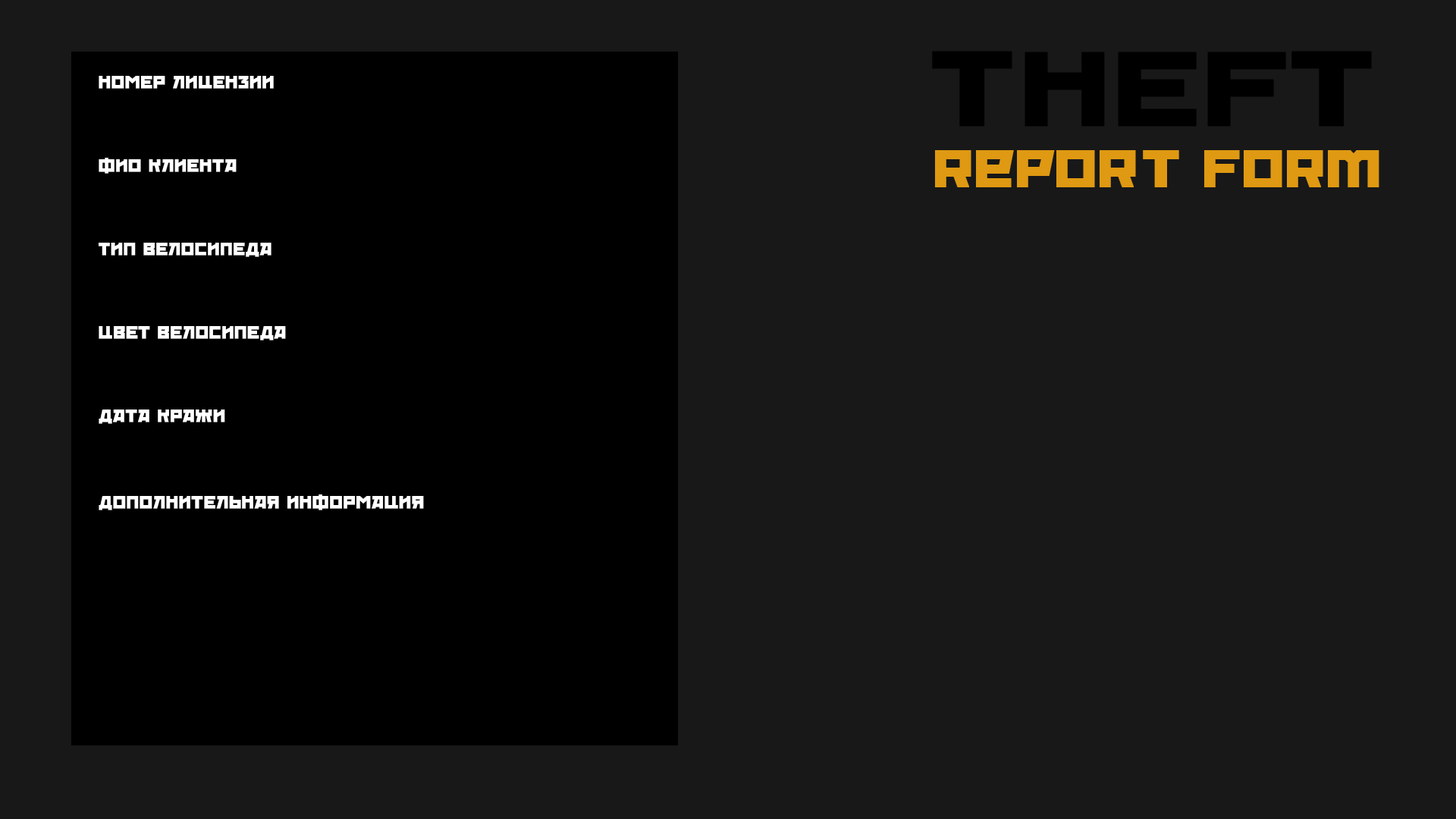
<style>
.page{position:relative;width:1456px;height:819px;background:#181818}
.page>*{position:absolute;margin:0}
.t1{font:45.5px/60.7px "RedOctober";color:#df9912;font-weight:bold;scale:1.19 1}
.t2{font:92.7px/60.7px "RedOctober";color:#000000;font-weight:bold;scale:1.33 1}
.t3{font:15.2px "RedOctober";color:#ffffff;font-weight:bold;scale:1.12 1}
</style>
<div class="page">
<p class="t1" style="left:932px;top:51px;width:447px;height:136px"><span class="t2">THEFT<br></span>report form</p>
<p class="t3" style="left:99px;top:76px;width:175px;height:13px">НОМЕР ЛИЦЕНЗИИ</p>
<p class="t3" style="left:99px;top:158px;width:138px;height:16px">ФИО КЛИЕНТА</p>
<p class="t3" style="left:99px;top:243px;width:172px;height:14px">ТИП ВЕЛОСИПЕДА</p>
<p class="t3" style="left:99px;top:326px;width:187px;height:14px">ЦВЕТ ВЕЛОСИПЕДА</p>
<p class="t3" style="left:99px;top:409px;width:126px;height:15px">ДАТА КРАЖИ</p>
<p class="t3" style="left:99px;top:494px;width:325px;height:16px">ДОПОЛНИТЕЛЬНАЯ ИНФОРМАЦИЯ</p>
</div>
